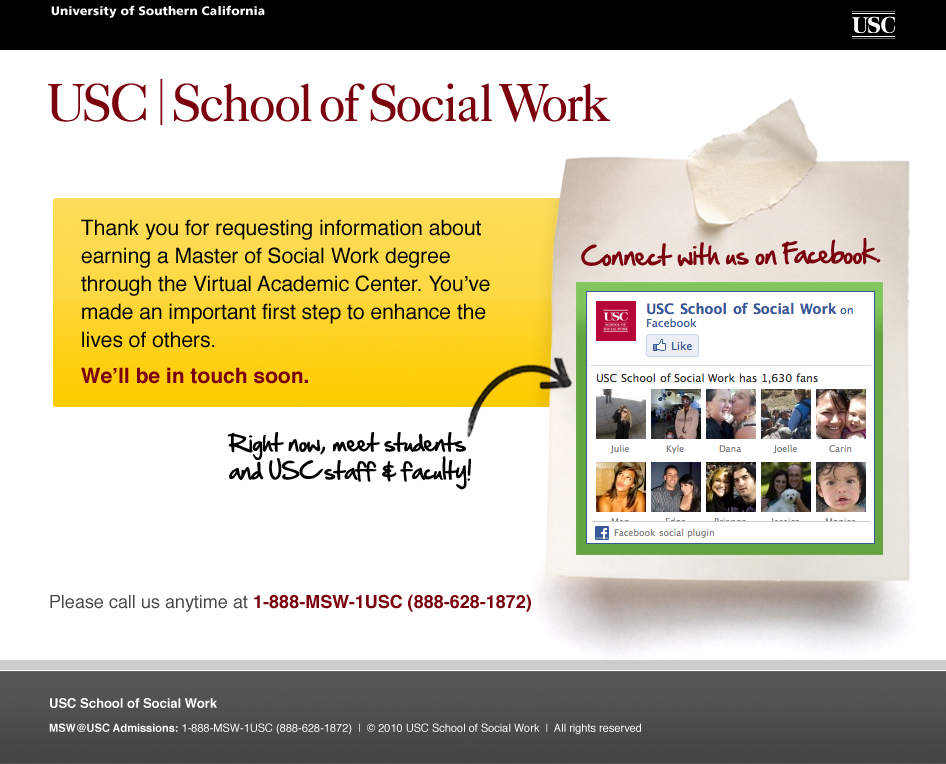
<style>
.page{position:relative;width:946px;height:764px;background:#ffffff}
.page>*{position:absolute;margin:0}
.t1{font:21px/28px "Helvetica";color:#000000}
.t2{font:21px/28px "Helvetica-Bold";color:#7a000d}
.t3{font:24px "Hand-Of-Sean";color:#7a000d}
.t4{font:21px/28px "Hand-Of-Sean";color:#000000}
.t5{font:18px "Helvetica-Bold";color:#7a000d}
.t6{font:18px "Helvetica";color:#474646}
.t7{font:11px/24px "Helvetica";color:#ffffff}
.t8{font:13px/14px "Helvetica-Bold";color:#ffffff}
.t9{font:11px/24px "Helvetica-Bold";color:#ffffff}
</style>
<div class="page">
<p class="t1" style="left:81px;top:219px;width:409px;height:165px">Thank you for requesting information about earning a Master of Social Work degree through the Virtual Academic Center. You’ve made an important first step to enhance the lives of others.<br><span class="t2">We’ll be in touch soon.</span></p>
<p class="t3" style="left:581px;top:238px;width:300px;height:29px;rotate:-1deg">Connect with us on Facebook.</p>
<p class="t4" style="left:227px;top:432px;width:244px;height:58px">Right now, meet students <br>and USC staff &amp; faculty!</p>
<p class="t5" style="left:50px;top:594px;width:481px;height:18px"><span class="t6">Please call us anytime at </span>1-888-MSW-1USC (888-628-1872)</p>
<p class="t7" style="left:49px;top:698px;width:592px;height:36px"><span class="t8">USC School of Social Work<br></span><span class="t9">MSW@USC Admissions: </span>1-888-MSW-1USC (888-628-1872)  |  © 2010 USC School of Social Work  |  All rights reserved</p>
</div>
